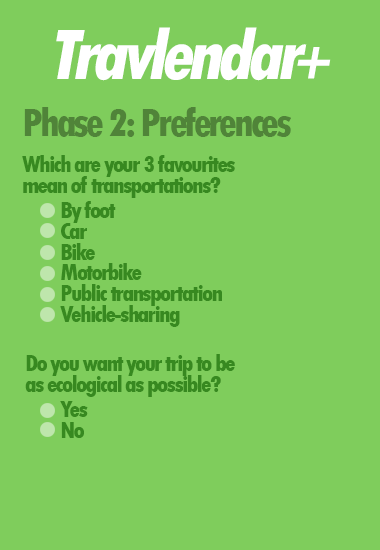
<style>
.page{position:relative;width:380px;height:550px;background:#7fcd5c}
.page>*{position:absolute;margin:0}
.t1{font:75px "TwCenMT-CondensedExtraBold";letter-spacing:-0.075em;color:#ffffff;font-style:italic}
.t2{font:58.3px "TwCenMT-CondensedExtraBold";letter-spacing:-0.075em;color:#ffffff;font-style:italic}
.t3{font:41.7px "TwCenMT-CondensedExtraBold";letter-spacing:-0.075em;color:#508439}
.t4{font:25px/16.7px "TwCenMT-CondensedExtraBold";letter-spacing:-0.075em;color:#378920}
.t5{font:25px/20.8px "TwCenMT-CondensedExtraBold";letter-spacing:-0.075em;color:#378920}
</style>
<div class="page">
<p class="t1" style="left:56px;top:27px;width:251px;height:54px">Travlendar</p>
<p class="t2" style="left:297px;top:47px;width:34px;height:32px">+</p>
<p class="t3" style="left:24px;top:107px;width:267px;height:30px">Phase 2: Preferences</p>
<p class="t4" style="left:22px;top:155px;width:213px;height:43px">Which are your 3 favourites <br><span class="t5">mean of transportations?</span></p>
<p class="t5" style="left:60px;top:201px;width:162px;height:126px">By foot<br>Car<br>Bike<br>Motorbike<br>Public transportation<br>Vehicle-sharing</p>
<p class="t5" style="left:25px;top:354px;width:210px;height:43px">Do you want your trip to be <br>as ecological as possible?</p>
<p class="t5" style="left:60px;top:401px;width:28px;height:37px">Yes<br>No</p>
</div>
